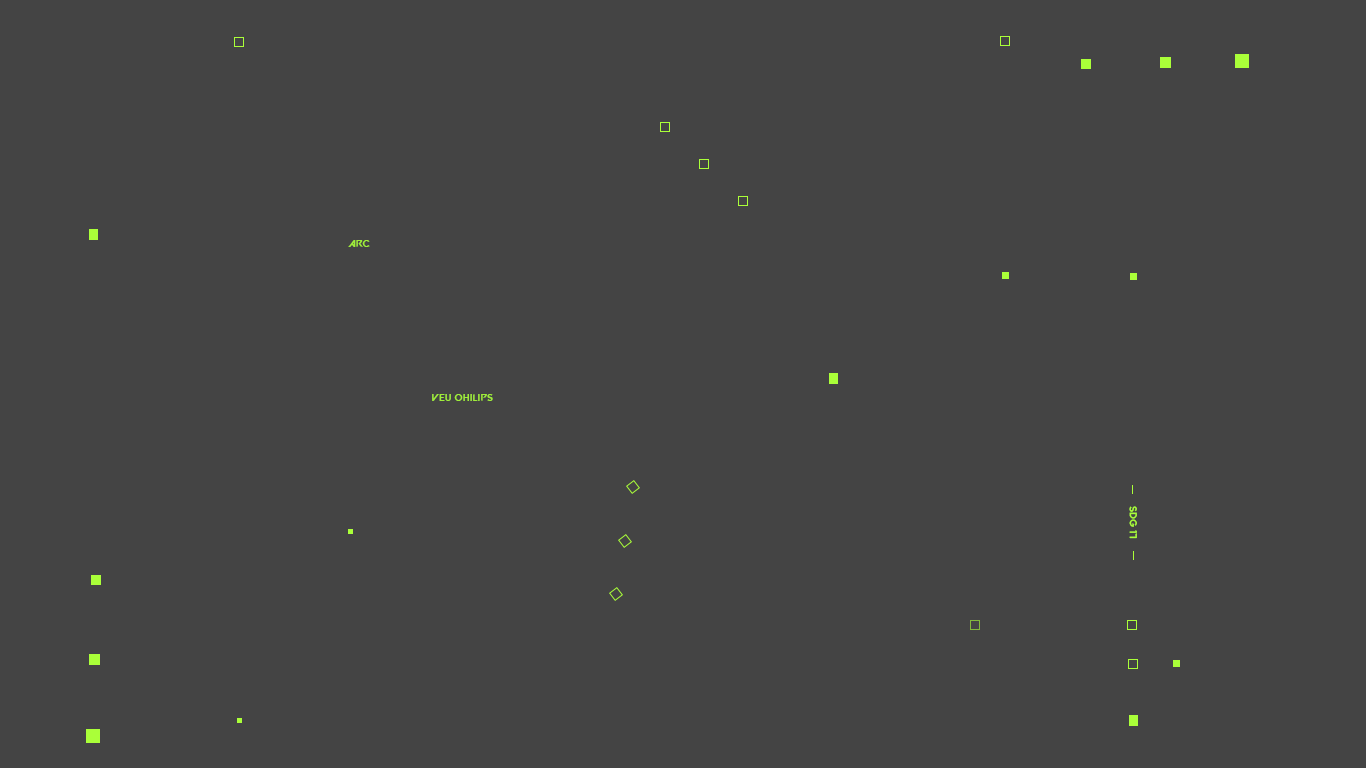
<style>
.page{position:relative;width:1366px;height:768px;background:#444444}
.page>*{position:absolute;margin:0}
.t1{font:10px "VALORANT-Regular";letter-spacing:0.005em;color:#aaff39}
.t2{font:10px "VALORANT-Regular";letter-spacing:0.01em;color:#aaff39}
</style>
<div class="page">
<p class="t1" style="left:348px;top:240px;width:22px;height:7px;opacity:0.87">ARC</p>
<p class="t2" style="left:432px;top:394px;width:61px;height:7px;opacity:0.87">veu ohilips</p>
<p class="t1" style="left:1129px;top:506px;width:8px;height:33px;rotate:90deg">SDG 17</p>
</div>
